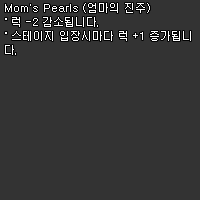
<style>
.page{position:relative;width:200px;height:200px;background:#333333}
.page>*{position:absolute;margin:0}
.t1{font:11px/14px "Dotum";color:#ffffff}
</style>
<div class="page">
<p class="t1" style="left:5px;top:3px;width:186px;height:52px">Mom's Pearls (엄마의 진주)<br>˚ 럭 -2 감소됩니다.<br>˚ 스테이지 입장시마다 럭 +1 증가됩니<br>다.</p>
</div>
